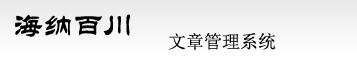
<style>
.page{position:relative;width:357px;height:60px}
.page>*{position:absolute;margin:0}
.t1{font:30px "STLiti";color:#000000}
.t2{font:18px "SimSun";color:#000000}
</style>
<div class="page">
<p class="t1" style="left:15px;top:14px;width:115px;height:23px">海纳百川</p>
<p class="t2" style="left:168px;top:33px;width:108px;height:17px">文章管理系统</p>
</div>
